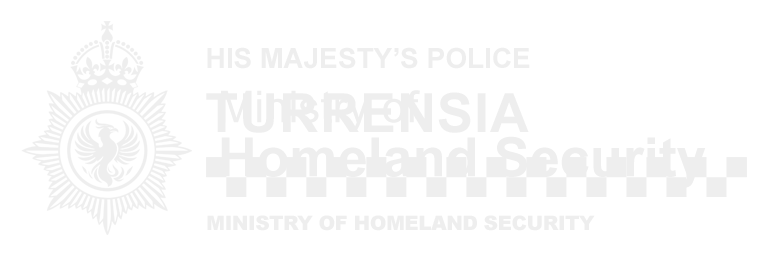
<style>
.page{position:relative;width:768px;height:256px;background:#ffffff}
.page>*{position:absolute;margin:0}
.t1{font:28px "Arial-BoldMT";color:#eeeeee}
.t2{font:54px "Arial-BoldMT";letter-spacing:0.02em;color:#eeeeee}
.t3{font:54px/54px "Arial-BoldMT";color:#eeeeee}
.t4{font:44px "ArialMT";color:#eeeeee}
.t5{font:20px "Arial-Black";letter-spacing:-0.025em;color:#eeeeee}
</style>
<div class="page">
<p class="t1" style="left:207px;top:47px;width:323px;height:22px">HIS MAJESTY’S POLICE</p>
<p class="t2" style="left:206px;top:92px;width:323px;height:41px">TURRENSIA</p>
<p class="t3" style="left:221px;top:90px;width:485px;height:98px"><span class="t4">Ministry of<br></span>Homeland Security</p>
<p class="t5" style="left:207px;top:215px;width:388px;height:16px">MINISTRY OF HOMELAND SECURITY</p>
</div>
